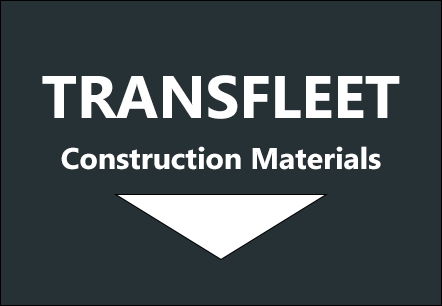
<style>
.page{position:relative;width:442px;height:306px;background:#253135}
.page>*{position:absolute;margin:0}
.t1{font:60px "MicrosoftNewTaiLue-Bold";color:#ffffff}
.t2{font:30px "MicrosoftNewTaiLue-Bold";color:#ffffff}
</style>
<div class="page">
<p class="t1" style="left:42px;top:75px;width:358px;height:44px">TRANSFLEET</p>
<p class="t2" style="left:61px;top:146px;width:320px;height:24px">Construction Materials</p>
</div>
